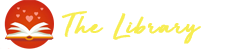
<style>
.page{position:relative;width:233px;height:49px;background:#ffffff}
.page>*{position:absolute;margin:0}
.t1{font:30px "GoldenPlains";letter-spacing:0.025em;color:#f7ed52;font-weight:bold}
</style>
<div class="page">
<p class="t1" style="left:61px;top:11px;width:140px;height:33px">The Library</p>
</div>
